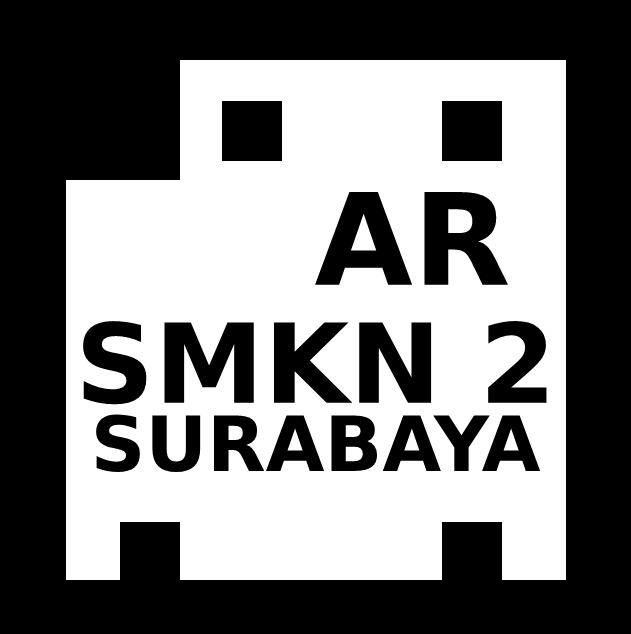
<style>
.page{position:relative;width:631px;height:634px;background:#000000}
.page>*{position:absolute;margin:0}
.t1{font:127px "DejaVuSans-Bold";color:#000000}
.t2{font:110px "DejaVuSans-Bold";color:#000000}
.t3{font:76px "DejaVuSans-Bold";color:#000000}
</style>
<div class="page">
<p class="t1" style="left:315px;top:192px;width:193px;height:93px">AR</p>
<p class="t2" style="left:83px;top:321px;width:464px;height:84px">SMKN 2</p>
<p class="t3" style="left:96px;top:414px;width:445px;height:58px">SURABAYA</p>
</div>
